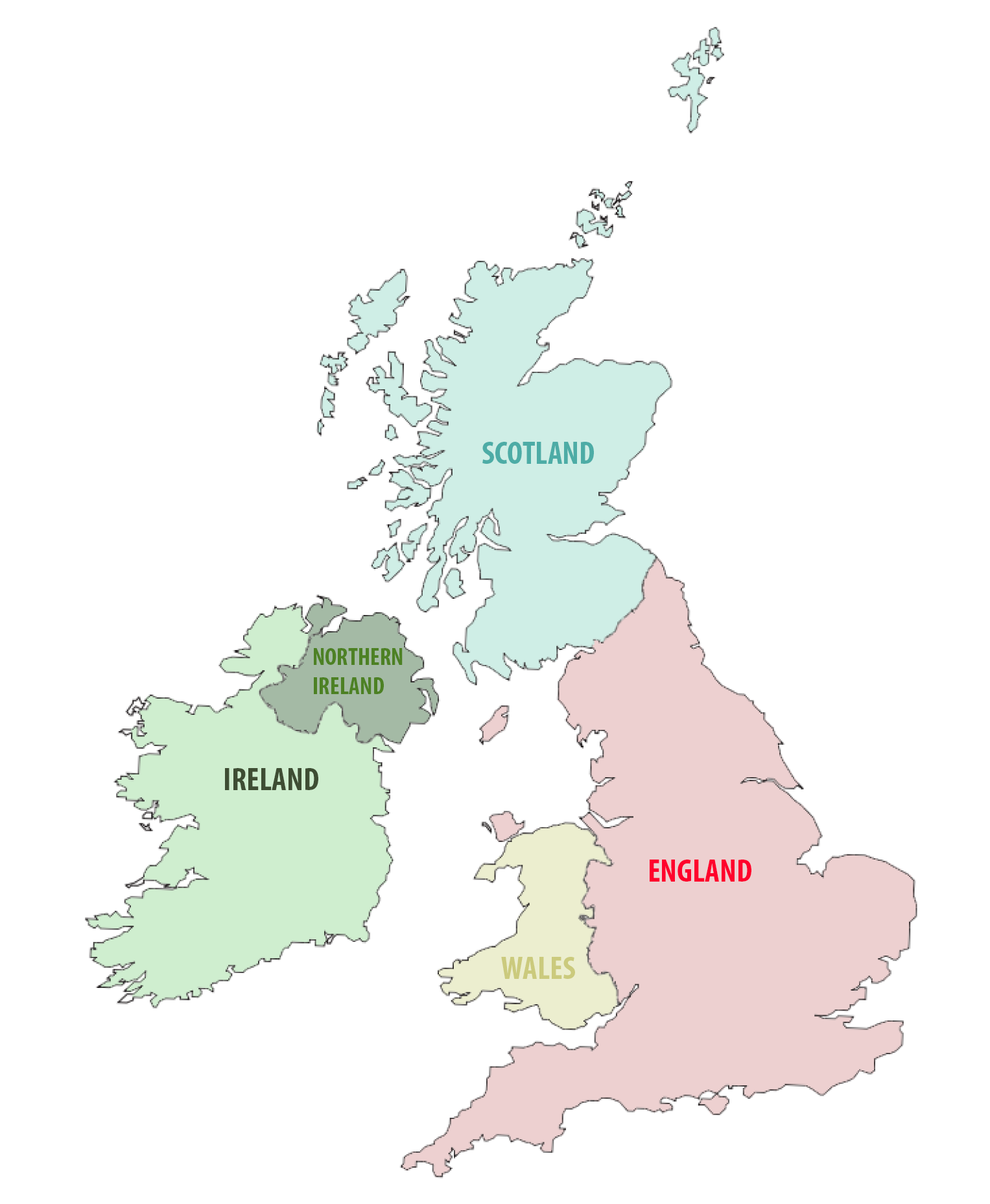
<style>
.page{position:relative;width:990px;height:1204px;background:#ffffff}
.page>*{position:absolute;margin:0}
.t1{font:32.4px "MyriadPro-BoldCond";color:#4daca6}
.t2{font:24.3px "MyriadPro-BoldCond";color:#4d8124}
.t3{font:32.4px "MyriadPro-BoldCond";color:#3e4d33}
.t4{font:32.4px "MyriadPro-BoldCond";color:#ff022c}
.t5{font:32.4px "MyriadPro-BoldCond";color:#cbca7d}
</style>
<div class="page">
<p class="t1" style="left:483px;top:442px;width:111px;height:22px">SCOTLAND</p>
<p class="t2" style="left:314px;top:648px;width:89px;height:46px">NORTHERN<br>IRELAND</p>
<p class="t3" style="left:225px;top:768px;width:93px;height:22px">IRELAND</p>
<p class="t4" style="left:650px;top:859px;width:102px;height:23px">ENGLAND</p>
<p class="t5" style="left:501px;top:957px;width:74px;height:22px">WALES</p>
</div>
